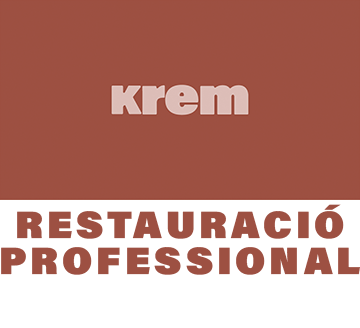
<style>
.page{position:relative;width:360px;height:328px;background:#9d5042}
.page>*{position:absolute;margin:0}
.t1{font:38px/36px "AcuminConcept-UltraBlack";letter-spacing:0.1em;color:#9d5042}
</style>
<div class="page">
<p class="t1" style="left:1px;top:204px;width:359px;height:71px;text-align:center">RESTAURACIÓ<br>PROFESSIONAL</p>
</div>
